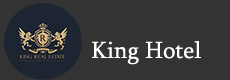
<style>
.page{position:relative;width:230px;height:80px;background:#333333}
.page>*{position:absolute;margin:0}
.t1{font:24px "Sylfaen";color:#ffffff}
</style>
<div class="page">
<p class="t1" style="left:92px;top:41px;width:109px;height:24px">King Hotel</p>
</div>
